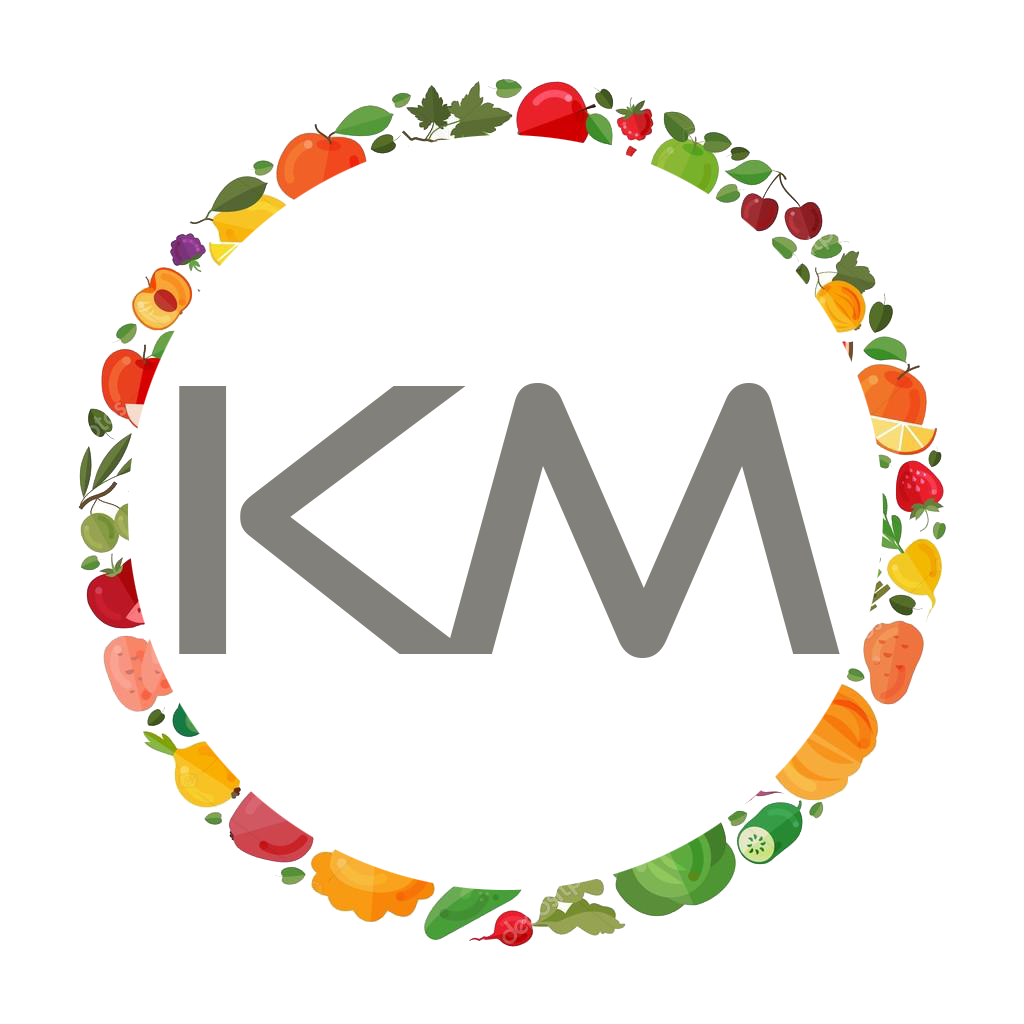
<style>
.page{position:relative;width:1024px;height:1024px;background:#ffffff}
.page>*{position:absolute;margin:0}
.t1{font:368px "GoodTimesRg-Regular";color:#81807a}
</style>
<div class="page">
<p class="t1" style="left:179px;top:386px;width:292px;height:268px">K</p>
<p class="t1" style="left:445px;top:383px;width:395px;height:275px">M</p>
</div>
